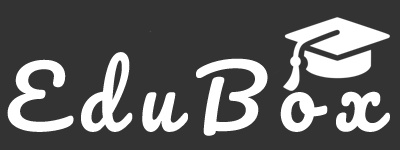
<style>
.page{position:relative;width:400px;height:150px;background:#333333}
.page>*{position:absolute;margin:0}
.t1{font:84.5px "Pacifico-Regular";letter-spacing:0.2em;color:#ffffff}
</style>
<div class="page">
<p class="t1" style="left:7px;top:52px;width:383px;height:84px">EduBox</p>
</div>
